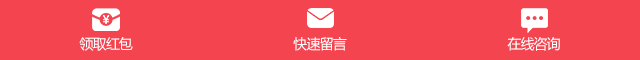
<style>
.page{position:relative;width:640px;height:60px;background:#f44450}
.page>*{position:absolute;margin:0}
.t1{font:14px "MicrosoftYaHei";letter-spacing:-0.06em;color:#ffffff;text-transform:uppercase}
</style>
<div class="page">
<p class="t1" style="left:79px;top:37px;width:54px;height:14px">领取红包</p>
<p class="t1" style="left:293px;top:37px;width:54px;height:14px">快速留言</p>
<p class="t1" style="left:507px;top:37px;width:53px;height:14px">在线咨询</p>
</div>
